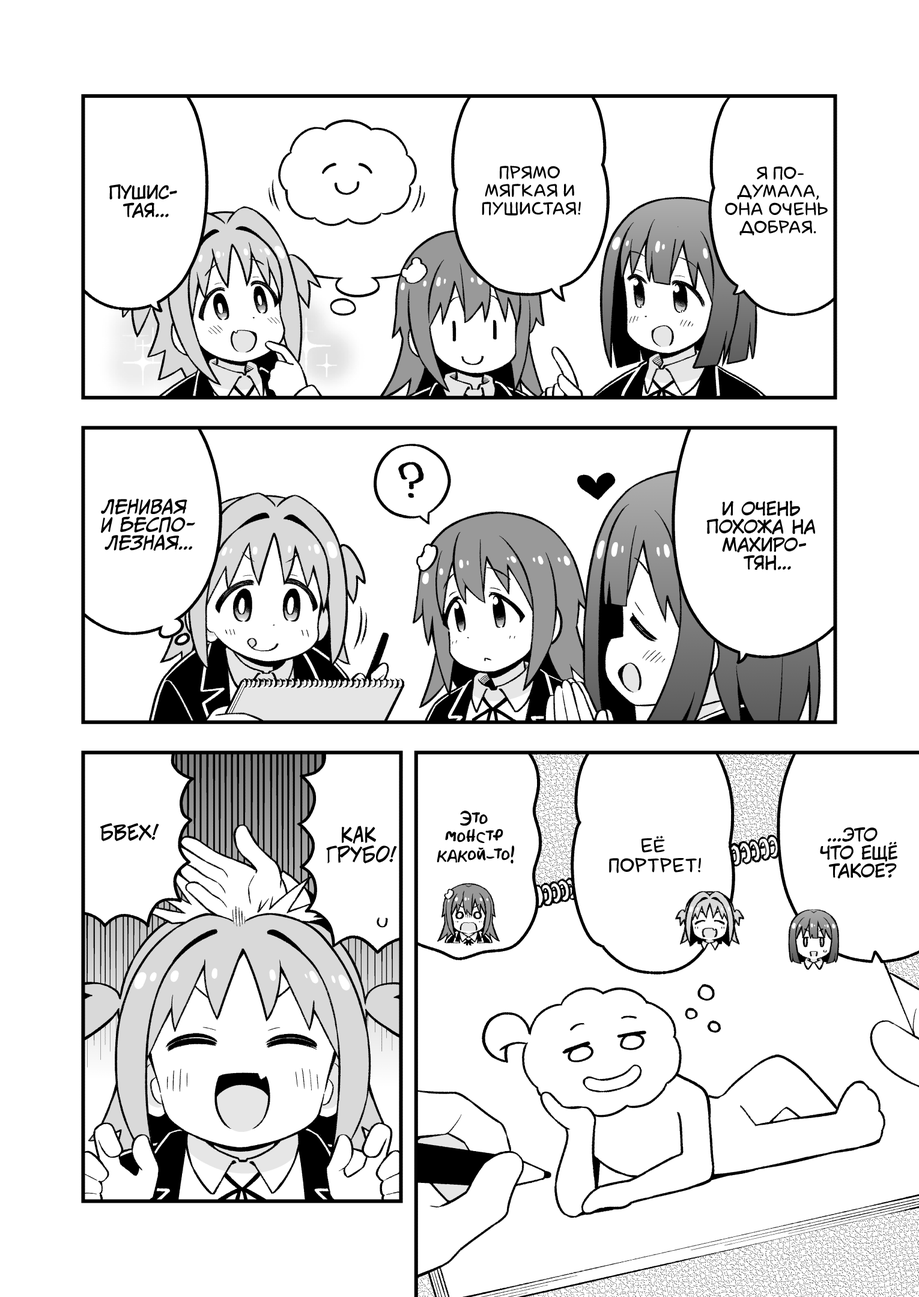
<style>
.page{position:relative;width:919px;height:1297px;background:#ffffff}
.page>*{position:absolute;margin:0}
.t1{font:18px "laCartoonerie";color:#000000;text-transform:uppercase}
.t2{font:18px "KuraiVoice2";color:#000000;text-transform:uppercase}
.t3{font:18px "CCMeanwhile";color:#000000;text-transform:uppercase;font-style:italic}
.t4{font:18px "AkbarPlain";color:#000000}
.t5{font:19.8px "v_CCJeffCampbell";color:#000000;text-transform:uppercase}
.t6{font:19.8px "laCartoonerie";color:#000000;text-transform:uppercase}
</style>
<div class="page">
<p class="t1" style="left:482px;top:166px;width:99px;height:50px;text-align:center">Прямо<br>мягкая и<br>пушистая!</p>
<p class="t1" style="left:725px;top:166px;width:103px;height:69px;text-align:center">Я по-<br>думала,<br>она очень<br>добрая.</p>
<p class="t2" style="left:109px;top:184px;width:68px;height:34px;text-align:center">Пушис-<br>тая...</p>
<p class="t3" style="left:101px;top:499px;width:94px;height:52px;text-align:center">Ленивая<br>и беспо-<br>лезная...</p>
<p class="t2" style="left:706px;top:500px;width:109px;height:71px;text-align:center">И очень<br>похожа на<br>Махиро-<br>тян...</p>
<p class="t4" style="left:437px;top:811px;width:78px;height:53px;text-align:center">Это<br>монстр<br>какой-то!</p>
<p class="t5" style="left:100px;top:824px;width:59px;height:18px">Бвех!</p>
<p class="t5" style="left:326px;top:826px;width:71px;height:38px;text-align:center">Как<br>грубо!</p>
<p class="t2" style="left:820px;top:827px;width:77px;height:52px;text-align:center">...Это<br>что ещё<br>такое?</p>
<p class="t6" style="left:609px;top:836px;width:92px;height:37px;text-align:center">Её<br>портрет!</p>
</div>
